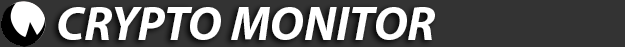
<style>
.page{position:relative;width:625px;height:47px;background:#333333}
.page>*{position:absolute;margin:0}
.t1{font:48px "MyriadPro-BoldIt";color:#ffffff}
</style>
<div class="page">
<p class="t1" style="left:58px;top:7px;width:377px;height:33px">CRYPTO MONITOR</p>
</div>
